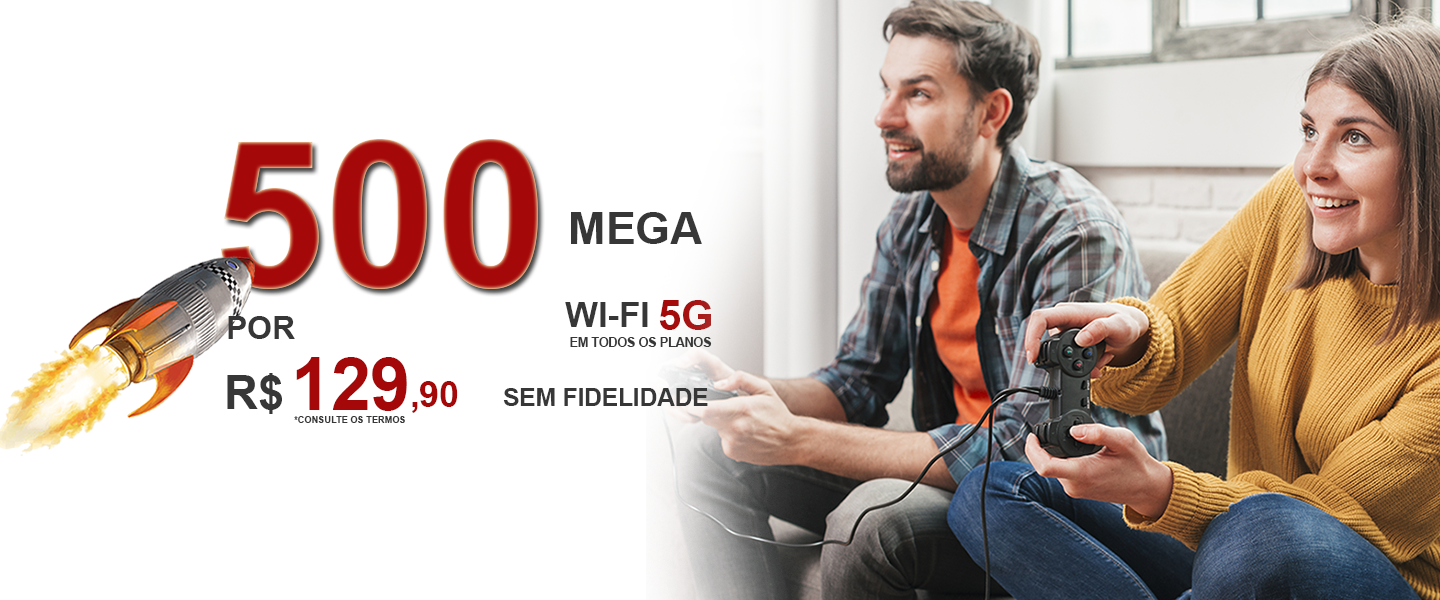
<style>
.page{position:relative;width:1440px;height:600px;background:#ffffff}
.page>*{position:absolute;margin:0}
.t1{font:203.4px "Arial-BoldMT";letter-spacing:-0.01em;color:#a50808;text-transform:uppercase}
.t2{font:45.4px "Arial-BoldMT";letter-spacing:-0.01em;color:#373737;text-transform:uppercase}
.t3{font:35.2px "Arial-BoldMT";letter-spacing:-0.01em;color:#373737;text-transform:uppercase}
.t4{font:41.8px "Arial-BoldMT";letter-spacing:-0.01em;color:#a50808;text-transform:uppercase}
.t5{font:32.1px "Arial-BoldMT";letter-spacing:-0.01em;color:#373737;text-transform:uppercase}
.t6{font:12.6px "Arial-BoldMT";letter-spacing:-0.01em;color:#373737;text-transform:uppercase}
.t7{font:72.6px "Arial-BoldMT";letter-spacing:-0.01em;color:#a50808;text-transform:uppercase}
.t8{font:47.2px "Arial-BoldMT";letter-spacing:-0.01em;color:#373737;text-transform:uppercase}
.t9{font:36.1px "Arial-BoldMT";letter-spacing:-0.01em;color:#a50808;text-transform:uppercase}
.t10{font:24.9px "Arial-BoldMT";letter-spacing:-0.01em;color:#373737;text-transform:uppercase}
.t11{font:9.3px "Arial-BoldMT";letter-spacing:-0.01em;color:#373737;text-transform:uppercase}
</style>
<div class="page">
<p class="t1" style="left:221px;top:138px;width:317px;height:151px">500</p>
<p class="t2" style="left:571px;top:212px;width:131px;height:32px">MEGA</p>
<p class="t3" style="left:565px;top:302px;width:83px;height:25px">WI-FI</p>
<p class="t4" style="left:659px;top:300px;width:52px;height:30px">5G</p>
<p class="t5" style="left:228px;top:316px;width:67px;height:23px">por</p>
<p class="t6" style="left:570px;top:337px;width:142px;height:10px">em todos os planos</p>
<p class="t7" style="left:296px;top:357px;width:111px;height:54px">129</p>
<p class="t8" style="left:227px;top:373px;width:55px;height:41px">R$</p>
<p class="t9" style="left:412px;top:381px;width:46px;height:32px">,90</p>
<p class="t10" style="left:503px;top:388px;width:205px;height:18px">sem fidelidade</p>
<p class="t11" style="left:294px;top:416px;width:111px;height:7px">*CONSULTE OS TERMOS</p>
</div>
